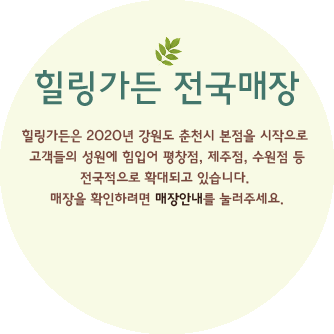
<style>
.page{position:relative;width:334px;height:334px;background:#f8fae5}
.page>*{position:absolute;margin:0}
.t1{font:14px/21px "HaanYGodic23";letter-spacing:-0.04em;color:#76453b}
.t2{font:37px/36px "HaanYGodic23";letter-spacing:-0.04em;color:#43766c}
.t3{font:14px/21px "HaanYGodic23";letter-spacing:-0.04em;color:#2f1611}
</style>
<div class="page">
<p class="t1" style="left:22px;top:70px;width:286px;height:137px;text-align:center"><span class="t2">힐링가든 전국매장<br></span><br>힐링가든은 2020년 강원도 춘천시 본점을 시작으로 <br>고객들의 성원에 힘입어 평창점, 제주점, 수원점 등<br>전국적으로 확대되고 있습니다. <br>매장을 확인하려면 <span class="t3">매장안내</span>를 눌러주세요.</p>
</div>
